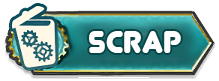
<style>
.page{position:relative;width:219px;height:81px;background:#ffffff}
.page>*{position:absolute;margin:0}
.t1{font:36px "Junegull";color:#ffffff}
</style>
<div class="page">
<p class="t1" style="left:89px;top:31px;width:92px;height:22px">SCRAP</p>
</div>
